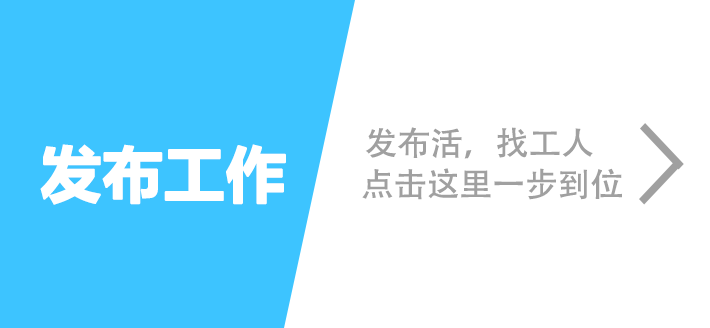
<style>
.page{position:relative;width:710px;height:328px;background:#ffffff}
.page>*{position:absolute;margin:0}
.t1{font:32.7px "AdobeHeitiStd-Regular";color:#a0a0a0}
.t2{font:60px "MicrosoftYaHei-Bold";color:#ffffff;font-weight:bold}
</style>
<div class="page">
<p class="t1" style="left:365px;top:127px;width:228px;height:32px">发布活，找工人</p>
<p class="t2" style="left:40px;top:144px;width:246px;height:61px">发布工作</p>
<p class="t1" style="left:362px;top:168px;width:260px;height:32px">点击这里一步到位</p>
</div>
